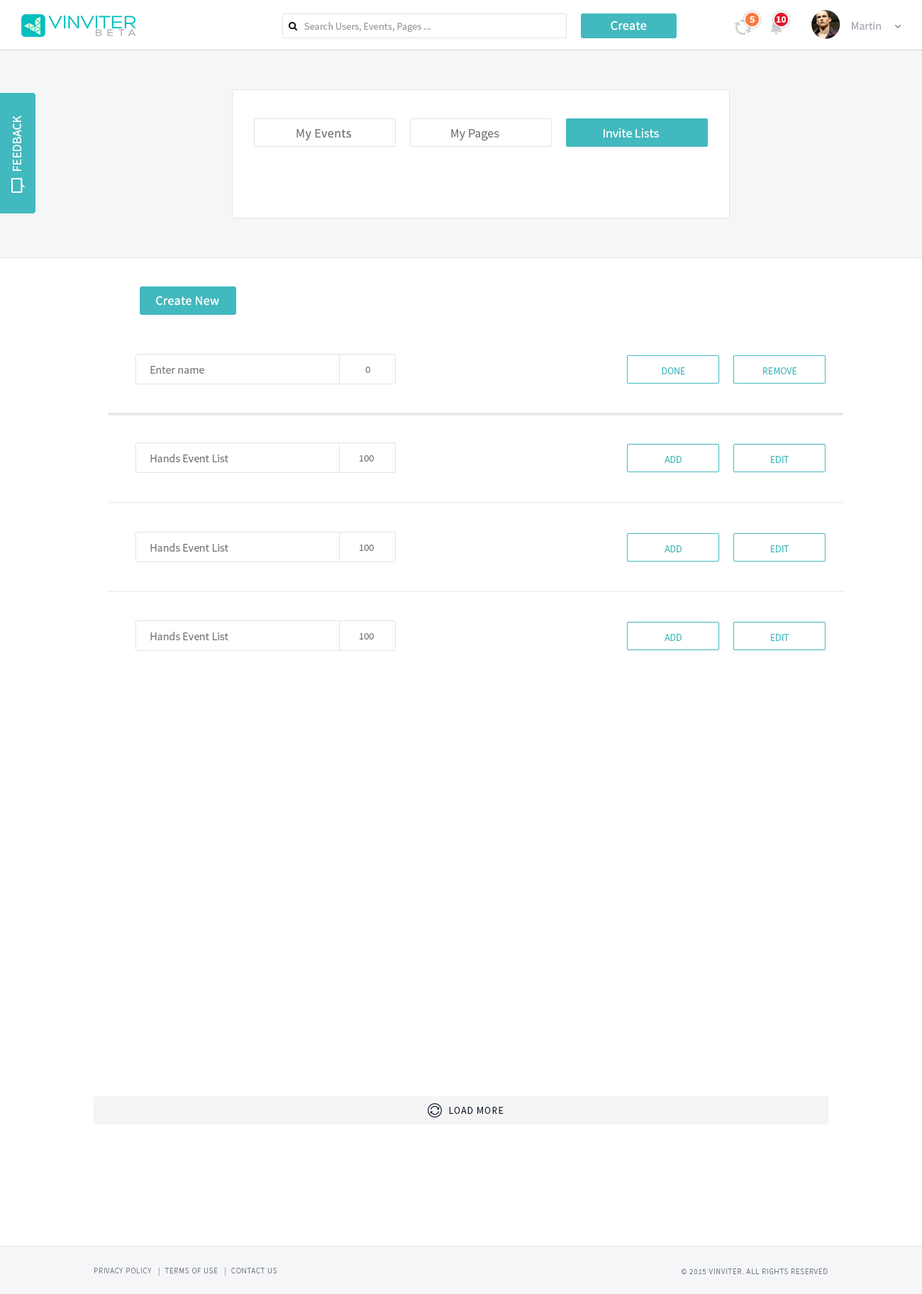
<style>
.page{position:relative;width:922px;height:1294px;background:#ffffff}
.page>*{position:absolute;margin:0}
.t1{font:9.2px "SourceSansPro-Bold";color:#ffffff}
.t2{font:10.2px "SourceSansPro-Regular";color:#999999}
.t3{font:12.8px "SourceSansPro-Regular";letter-spacing:0.02em;color:#ffffff}
.t4{font:11.3px "SourceSansPro-Regular";color:#a3a6ae}
.t5{font:12.8px "SourceSansPro-Regular";color:#ffffff}
.t6{font:12.8px "SourceSansPro-Regular";letter-spacing:0.02em;color:#767676}
.t7{font:12.8px "SourceSansPro-Regular";color:#767676}
.t8{font:11.3px "SourceSansPro-Regular";color:#767676}
.t9{font:9.9px "SourceSansPro-Regular";color:#767676}
.t10{font:9.9px "SourceSansPro-Regular";color:#42b9be}
.t11{font:9.9px "SourceSansPro-Regular";letter-spacing:0.075em;color:#162136;text-transform:uppercase}
.t12{font:7.8px "SourceSansPro-Light";letter-spacing:0.075em;color:#747a85;text-transform:uppercase}
</style>
<div class="page">
<p class="t1" style="left:749px;top:16px;width:5px;height:7px">5</p>
<p class="t1" style="left:776px;top:16px;width:10px;height:7px">10</p>
<p class="t2" style="left:304px;top:22px;width:126px;height:11px">Search Users, Events, Pages ...</p>
<p class="t3" style="left:610px;top:21px;width:37px;height:9px">Create</p>
<p class="t4" style="left:851px;top:22px;width:30px;height:8px">Martin</p>
<p class="t5" style="left:13px;top:116px;width:8px;height:55px;rotate:-90deg">FEEDBACK</p>
<p class="t6" style="left:296px;top:129px;width:55px;height:11px">My Events</p>
<p class="t7" style="left:451px;top:129px;width:48px;height:12px">My Pages</p>
<p class="t5" style="left:603px;top:128px;width:56px;height:10px">Invite Lists</p>
<p class="t3" style="left:156px;top:296px;width:63px;height:10px">Create New</p>
<p class="t8" style="left:150px;top:366px;width:54px;height:8px">Enter name</p>
<p class="t9" style="left:365px;top:367px;width:5px;height:6px">0</p>
<p class="t10" style="left:661px;top:367px;width:24px;height:7px">DONE</p>
<p class="t10" style="left:763px;top:367px;width:34px;height:7px">REMOVE</p>
<p class="t8" style="left:150px;top:454px;width:78px;height:8px">Hands Event List</p>
<p class="t9" style="left:359px;top:455px;width:15px;height:7px">100</p>
<p class="t10" style="left:664px;top:456px;width:17px;height:7px">ADD</p>
<p class="t10" style="left:771px;top:456px;width:18px;height:7px">EDIT</p>
<p class="t8" style="left:150px;top:543px;width:78px;height:9px">Hands Event List</p>
<p class="t9" style="left:359px;top:544px;width:15px;height:7px">100</p>
<p class="t10" style="left:664px;top:545px;width:17px;height:7px">ADD</p>
<p class="t10" style="left:771px;top:545px;width:18px;height:7px">EDIT</p>
<p class="t8" style="left:150px;top:632px;width:78px;height:8px">Hands Event List</p>
<p class="t9" style="left:359px;top:633px;width:15px;height:6px">100</p>
<p class="t10" style="left:664px;top:634px;width:17px;height:7px">ADD</p>
<p class="t10" style="left:771px;top:634px;width:18px;height:7px">EDIT</p>
<p class="t11" style="left:449px;top:1107px;width:54px;height:7px">Load more</p>
<p class="t12" style="left:94px;top:1267px;width:183px;height:8px">Privacy Policy   |  Terms of Use   |  Contact us</p>
<p class="t12" style="left:681px;top:1268px;width:146px;height:6px">© 2015 VINVITER. All rights reserved</p>
</div>
